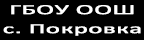
<style>
.page{position:relative;width:144px;height:40px;background:#000000}
.page>*{position:absolute;margin:0}
.t1{font:13.9px/18.7px "Calibri";color:#ffffff;font-weight:bold;scale:1.91 1}
</style>
<div class="page">
<p class="t1" style="left:3px;top:5px;width:138px;height:31px;text-align:center">ГБОУ ООШ<br>с. Покровка</p>
</div>
